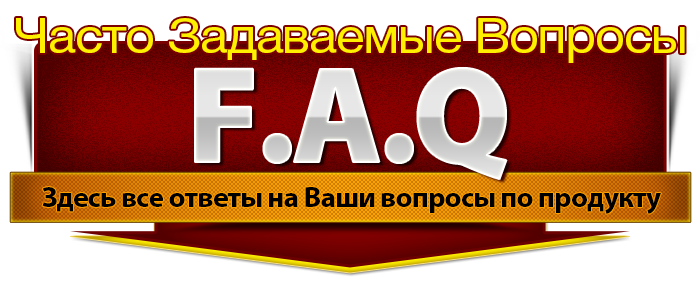
<style>
.page{position:relative;width:700px;height:300px;background:#ffffff}
.page>*{position:absolute;margin:0}
.t1{font:48px "Helvetica-5-Normal";letter-spacing:-0.025em;color:#fff000;scale:1.1 1}
.t2{font:138.2px "MyriadPro-Black";letter-spacing:-0.025em;scale:0.97 1}
.t3{font:29.3px "MyriadPro-Bold";letter-spacing:-0.025em;color:#000000}
</style>
<div class="page">
<p class="t1" style="left:16px;top:18px;width:669px;height:45px">Часто Задаваемые Вопросы</p>
<p class="t2" style="left:195px;top:68px;width:312px;height:111px">F.A.Q</p>
<p class="t3" style="left:42px;top:187px;width:619px;height:27px">Здесь все ответы на Ваши вопросы по продукту</p>
</div>
